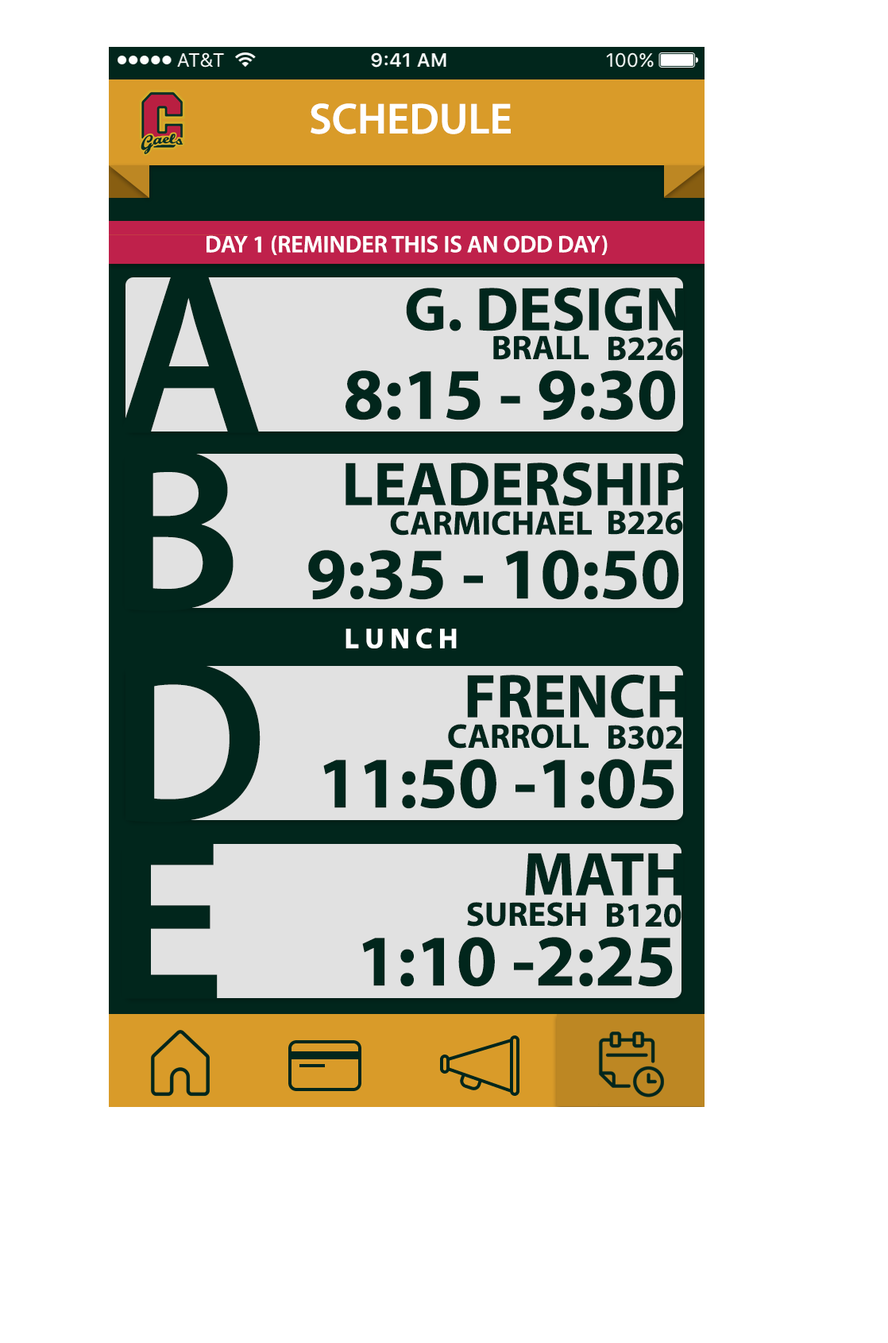
<style>
.page{position:relative;width:888px;height:1343px;background:#ffffff}
.page>*{position:absolute;margin:0}
.t1{font:43.7px "MyriadPro-Semibold";color:#ffffff}
.t2{font:23.8px "MyriadPro-Semibold";color:#ffffff}
.t3{font:233px "MyriadPro-Semibold";color:#01261c}
.t4{font:62.1px "MyriadPro-Bold";color:#01261c}
.t5{font:34.1px "MyriadPro-Bold";color:#01261c}
.t6{font:34px "MyriadPro-Bold";color:#01261c}
.t7{font:73.1px "MyriadPro-Bold";color:#01261c}
.t8{font:28.6px "MyriadPro-Bold";color:#ffffff}
</style>
<div class="page">
<p class="t1" style="left:311px;top:103px;width:200px;height:31px">SCHEDULE</p>
<p class="t2" style="left:207px;top:235px;width:401px;height:20px">DAY 1 (REMINDER THIS IS AN ODD DAY)</p>
<p class="t3" style="left:121px;top:275px;width:138px;height:158px">A</p>
<p class="t4" style="left:406px;top:287px;width:278px;height:44px">G. DESIGN</p>
<p class="t5" style="left:493px;top:335px;width:96px;height:25px">BRALL</p>
<p class="t6" style="left:609px;top:336px;width:74px;height:25px">B226</p>
<p class="t7" style="left:346px;top:370px;width:329px;height:50px">8:15 - 9:30</p>
<p class="t3" style="left:124px;top:450px;width:110px;height:161px">B</p>
<p class="t4" style="left:346px;top:462px;width:343px;height:44px">LEADERSHIP</p>
<p class="t5" style="left:390px;top:511px;width:202px;height:24px">CARMICHAEL</p>
<p class="t6" style="left:609px;top:510px;width:74px;height:25px">B226</p>
<p class="t7" style="left:308px;top:550px;width:371px;height:50px">9:35 - 10:50</p>
<p class="t8" style="left:346px;top:628px;width:111px;height:20px">L U N C H</p>
<p class="t3" style="left:126px;top:662px;width:135px;height:160px">D</p>
<p class="t4" style="left:467px;top:674px;width:218px;height:44px">FRENCH</p>
<p class="t5" style="left:448px;top:724px;width:141px;height:24px">CARROLL</p>
<p class="t6" style="left:609px;top:725px;width:73px;height:24px">B302</p>
<p class="t7" style="left:323px;top:759px;width:351px;height:50px">11:50 -1:05</p>
<p class="t3" style="left:122px;top:841px;width:96px;height:158px">E</p>
<p class="t4" style="left:525px;top:852px;width:158px;height:43px">MATH</p>
<p class="t5" style="left:467px;top:902px;width:119px;height:24px">SURESH</p>
<p class="t6" style="left:607px;top:902px;width:75px;height:25px">B120</p>
<p class="t7" style="left:362px;top:937px;width:311px;height:50px">1:10 -2:25</p>
</div>
